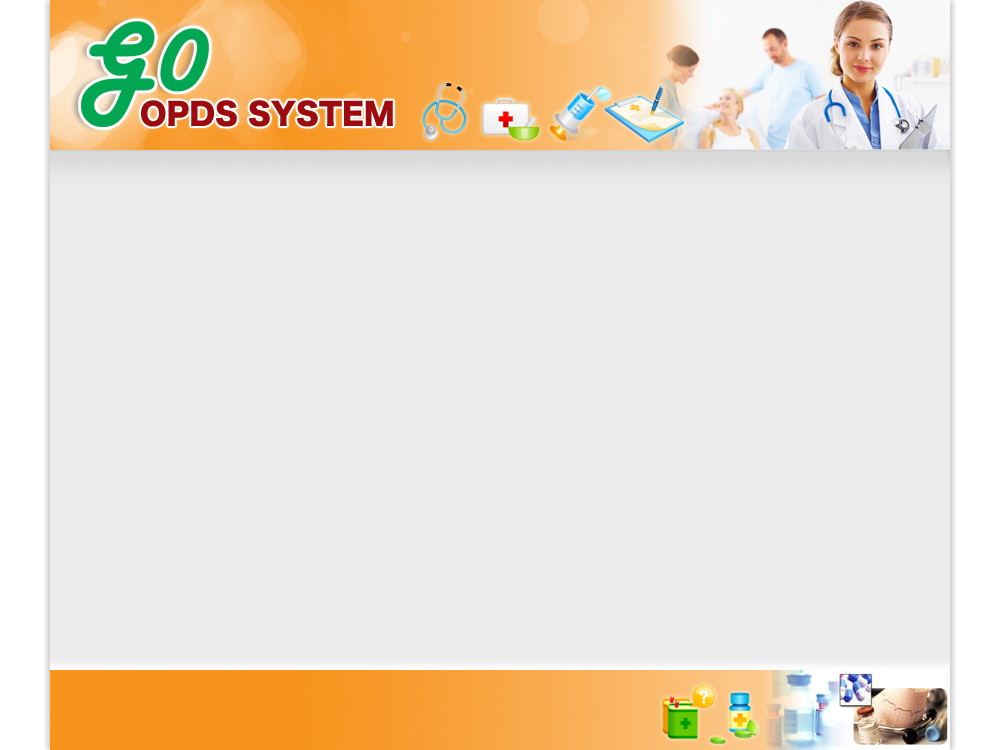
<style>
.page{position:relative;width:1000px;height:750px;background:#ececec}
.page>*{position:absolute;margin:0}
.t1{font:30px "HiraKakuStd-W8";color:#9e0b0f}
</style>
<div class="page">
<p class="t1" style="left:141px;top:100px;width:252px;height:27px">OPDS SYSTEM</p>
</div>
